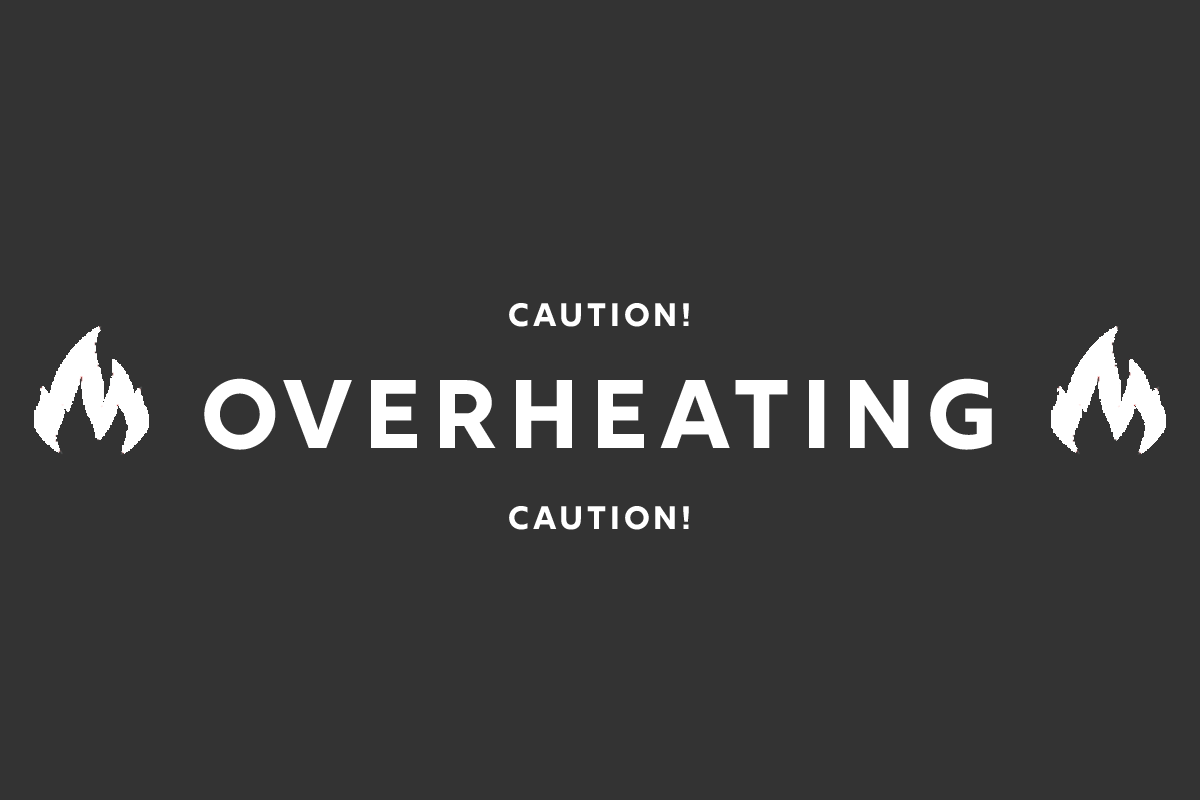
<style>
.page{position:relative;width:1200px;height:800px;background:#333333}
.page>*{position:absolute;margin:0}
.t1{font:97px/121.3px "Rig-BoldFace";letter-spacing:0.06em;color:#ffffff}
.t2{font:32.3px/97px "Rig-BoldFace";letter-spacing:0.06em;color:#ffffff}
.t3{font:32.3px/80.8px "Rig-BoldFace";letter-spacing:0.06em;color:#ffffff}
</style>
<div class="page">
<p class="t1" style="left:204px;top:303px;width:788px;height:227px;text-align:center"><span class="t2">CAUTION!<br></span>OVERHEATING<br><span class="t3">CAUTION!</span></p>
</div>
